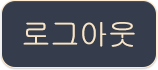
<style>
.page{position:relative;width:158px;height:70px;background:#353c4b}
.page>*{position:absolute;margin:0}
.t1{font:30px "Gulim";letter-spacing:-0.04em;color:#f6e4c8}
</style>
<div class="page">
<p class="t1" style="left:23px;top:22px;width:112px;height:25px">로그아웃</p>
</div>
